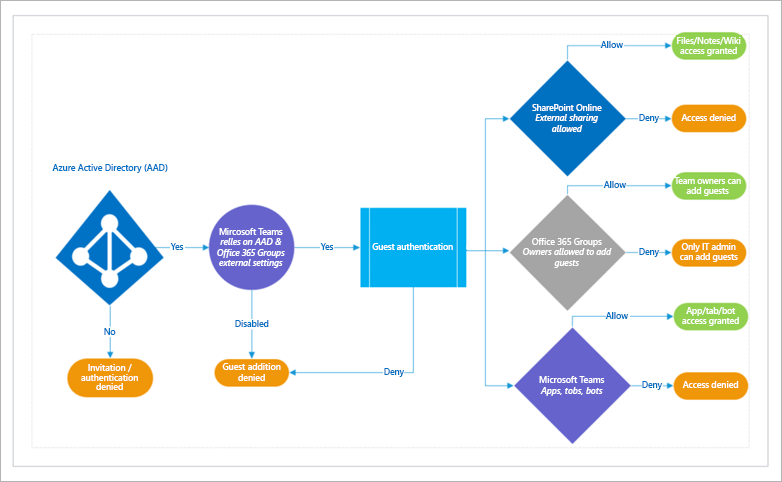
<style>
.page{position:relative;width:782px;height:482px;background:#ffffff}
.page>*{position:absolute;margin:0}
.t1{font:8.7px "SegoeUI-Semibold";color:#0070c0}
.t2{font:8.5px "SegoeUI-Semibold";color:#ffffff}
.t3{font:8.5px "SegoeUI-SemiboldItalic";color:#ffffff}
.t4{font:8.7px "SegoeUI-Semibold";color:#0072c6}
.t5{font:8.7px/9.3px "SegoeUI-Semibold";color:#ffffff}
.t6{font:8.7px "SegoeUI-Semibold";color:#ffffff}
.t7{font:8.7px "SegoeUI-SemiboldItalic";color:#ffffff}
</style>
<div class="page">
<p class="t1" style="left:600px;top:41px;width:23px;height:7px">Allow</p>
<p class="t2" style="left:677px;top:37px;width:64px;height:19px;text-align:center">Files/Notes/Wiki<br>access granted</p>
<p class="t3" style="left:532px;top:104px;width:70px;height:28px;text-align:center"><span class="t2">SharePoint Online<br></span>External sharing<br>allowed</p>
<p class="t1" style="left:639px;top:114px;width:21px;height:9px">Deny</p>
<p class="t2" style="left:681px;top:114px;width:55px;height:7px">Access denied</p>
<p class="t4" style="left:52px;top:164px;width:116px;height:9px">Azure Active Directory (AAD)</p>
<p class="t1" style="left:603px;top:181px;width:23px;height:7px">Allow</p>
<p class="t2" style="left:674px;top:177px;width:67px;height:19px;text-align:center">Team owners can<br>add guests</p>
<p class="t3" style="left:217px;top:228px;width:68px;height:40px;text-align:center"><span class="t2">Mircosoft Teams<br></span>relles on AAD &amp;<br>Office 365 Groups<br>external settings</p>
<p class="t1" style="left:170px;top:243px;width:14px;height:7px">Yes</p>
<p class="t1" style="left:320px;top:243px;width:14px;height:7px">Yes</p>
<p class="t2" style="left:372px;top:243px;width:81px;height:7px">Guest authentication</p>
<p class="t3" style="left:522px;top:238px;width:90px;height:30px;text-align:center"><span class="t2">Office 365 Groups<br></span>Owners allowed to add<br>guests</p>
<p class="t2" style="left:680px;top:243px;width:58px;height:19px;text-align:center">Only IT admin<br>can add guests</p>
<p class="t1" style="left:639px;top:248px;width:21px;height:9px">Deny</p>
<p class="t1" style="left:605px;top:312px;width:23px;height:7px">Allow</p>
<p class="t2" style="left:682px;top:307px;width:57px;height:19px;text-align:center">App/tab/bot<br>access granted</p>
<p class="t1" style="left:104px;top:328px;width:12px;height:7px">No</p>
<p class="t1" style="left:235px;top:320px;width:34px;height:7px">Disabled</p>
<p class="t5" style="left:81px;top:364px;width:57px;height:26px;text-align:center">Invitation /<br>authentication<br>denied</p>
<p class="t6" style="left:222px;top:363px;width:59px;height:18px;text-align:center">Guest addition<br>denied</p>
<p class="t1" style="left:384px;top:368px;width:21px;height:9px">Deny</p>
<p class="t7" style="left:539px;top:376px;width:66px;height:20px;text-align:center"><span class="t6">Microsoft Teams<br></span>Apps, tobs, bots</p>
<p class="t1" style="left:642px;top:381px;width:21px;height:9px">Deny</p>
<p class="t6" style="left:682px;top:381px;width:57px;height:7px">Access denied</p>
</div>
